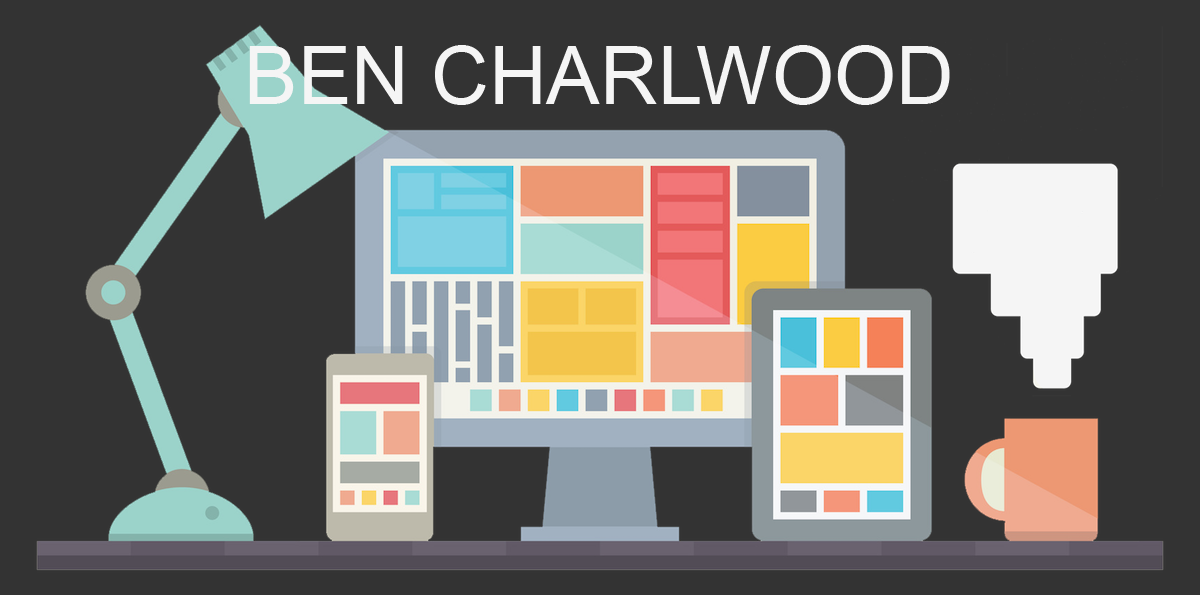
<style>
.page{position:relative;width:1200px;height:595px;background:#333333}
.page>*{position:absolute;margin:0}
.t1{font:80px "ArialMT";color:#f5f5f5}
</style>
<div class="page">
<p class="t1" style="left:249px;top:45px;width:701px;height:60px">BEN CHARLWOOD</p>
</div>
